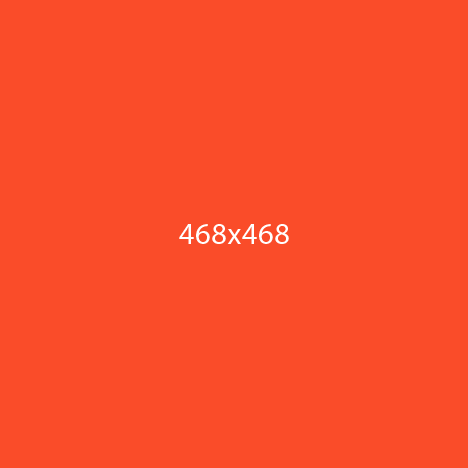
<style>
.page{position:relative;width:468px;height:468px;background:#fa4c29}
.page>*{position:absolute;margin:0}
.t1{font:30px "MyriadPro-Regular";letter-spacing:0.025em;color:#ffffff}
</style>
<div class="page">
<p class="t1" style="left:179px;top:224px;width:110px;height:20px">468x468</p>
</div>
